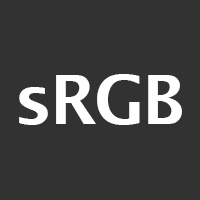
<style>
.page{position:relative;width:200px;height:200px;background:#323232}
.page>*{position:absolute;margin:0}
.t1{font:68px "LucidaSans-Demi";letter-spacing:-0.04em;color:#ffffff}
</style>
<div class="page">
<p class="t1" style="left:19px;top:74px;width:163px;height:51px">sRGB</p>
</div>
